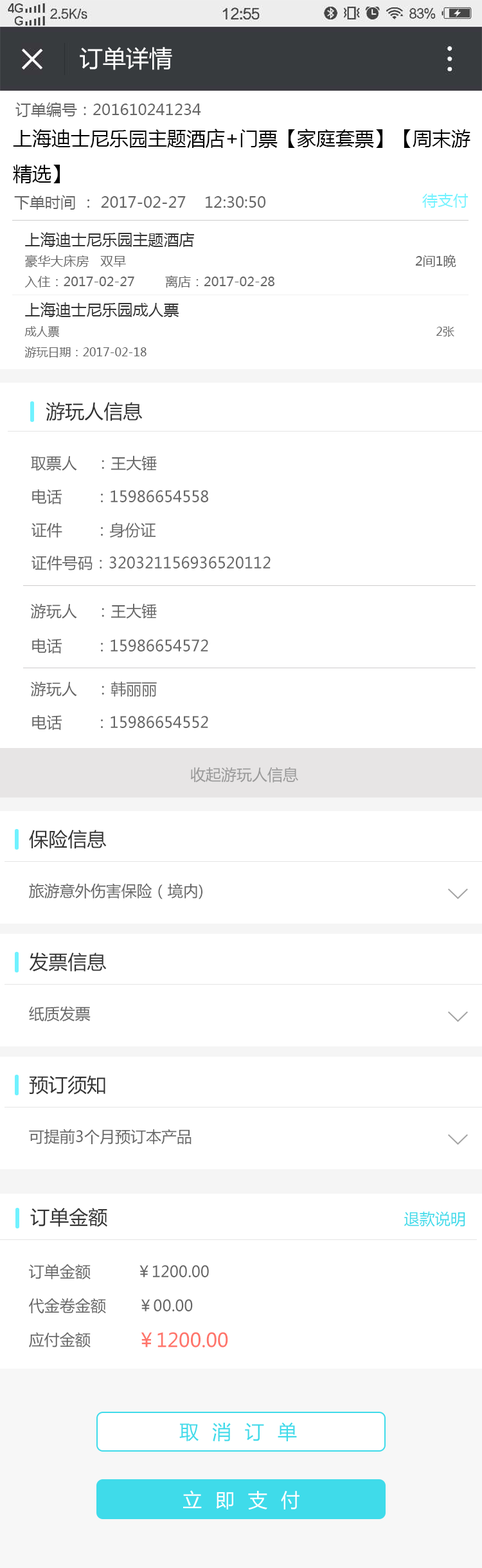
<style>
.page{position:relative;width:482px;height:1568px;background:#ffffff}
.page>*{position:absolute;margin:0}
.t1{font:23.2px "MicrosoftYaHei";color:#ffffff}
.t2{font:15.4px "MicrosoftYaHei";color:#666666}
.t3{font:19.3px/37.9px "MicrosoftYaHei";color:#000000}
.t4{font:15.4px "MicrosoftYaHei";color:#70f2ff}
.t5{font:12.9px/23.2px "MicrosoftYaHei";color:#666666}
.t6{font:15.4px/23.2px "MicrosoftYaHei";color:#333333}
.t7{font:11.6px/23.2px "MicrosoftYaHei";color:#666666}
.t8{font:19.3px "MicrosoftYaHei";color:#333333}
.t9{font:15.4px "MicrosoftYaHei";color:#999999}
.t10{font:15.4px "MicrosoftYaHei";color:#3fdbea}
.t11{font:19.3px "MicrosoftYaHei";color:#ff756b}
.t12{font:19.3px "MicrosoftYaHei";letter-spacing:0.2em;color:#3fdbea}
.t13{font:19.3px "MicrosoftYaHei";letter-spacing:0.2em;color:#ffffff}
</style>
<div class="page">
<p class="t1" style="left:80px;top:47px;width:92px;height:23px">订单详情</p>
<p class="t2" style="left:15px;top:102px;width:186px;height:15px">订单编号：201610241234</p>
<p class="t3" style="left:13px;top:129px;width:458px;height:54px">上海迪士尼乐园主题酒店+门票【家庭套票】【周末游<br>精选】</p>
<p class="t2" style="left:14px;top:195px;width:252px;height:15px">下单时间 ： 2017-02-27    12:30:50</p>
<p class="t4" style="left:423px;top:193px;width:46px;height:15px">待支付</p>
<p class="t5" style="left:24px;top:232px;width:433px;height:56px"><span class="t6">上海迪士尼乐园主题酒店<br></span>豪华大床房   双早                                                                            2间1晚<br>入住：2017-02-27        离店：2017-02-28</p>
<p class="t7" style="left:24px;top:302px;width:431px;height:56px"><span class="t6">上海迪士尼乐园成人票<br></span>成人票                                                                                                              2张<br>游玩日期：2017-02-18</p>
<p class="t8" style="left:46px;top:402px;width:97px;height:19px">游玩人信息</p>
<p class="t2" style="left:31px;top:455px;width:126px;height:16px">取票人    ：王大锤</p>
<p class="t2" style="left:32px;top:489px;width:176px;height:15px">电话       ：15986654558</p>
<p class="t2" style="left:32px;top:522px;width:124px;height:16px">证件       ：身份证</p>
<p class="t2" style="left:32px;top:556px;width:239px;height:14px">证件号码：320321156936520112</p>
<p class="t2" style="left:30px;top:603px;width:127px;height:16px">游玩人    ：王大锤</p>
<p class="t2" style="left:32px;top:639px;width:176px;height:14px">电话       ：15986654572</p>
<p class="t2" style="left:30px;top:681px;width:127px;height:16px">游玩人    ：韩丽丽</p>
<p class="t2" style="left:32px;top:715px;width:176px;height:15px">电话       ：15986654552</p>
<p class="t9" style="left:190px;top:767px;width:108px;height:16px">收起游玩人信息</p>
<p class="t8" style="left:29px;top:830px;width:78px;height:19px">保险信息</p>
<p class="t2" style="left:29px;top:883px;width:174px;height:16px">旅游意外伤害保险（境内)</p>
<p class="t8" style="left:29px;top:953px;width:78px;height:19px">发票信息</p>
<p class="t2" style="left:29px;top:1006px;width:62px;height:15px">纸质发票</p>
<p class="t8" style="left:29px;top:1075px;width:76px;height:20px">预订须知</p>
<p class="t2" style="left:29px;top:1129px;width:163px;height:16px">可提前3个月预订本产品</p>
<p class="t8" style="left:30px;top:1208px;width:77px;height:19px">订单金额</p>
<p class="t10" style="left:405px;top:1211px;width:61px;height:16px">退款说明</p>
<p class="t2" style="left:29px;top:1264px;width:180px;height:16px">订单金额          ￥1200.00</p>
<p class="t2" style="left:29px;top:1298px;width:164px;height:16px">代金卷金额       ￥00.00</p>
<p class="t2" style="left:29px;top:1332px;width:62px;height:16px">应付金额</p>
<p class="t11" style="left:141px;top:1332px;width:87px;height:15px">￥1200.00</p>
<p class="t12" style="left:179px;top:1422px;width:118px;height:19px">取 消 订 单</p>
<p class="t13" style="left:183px;top:1490px;width:117px;height:20px">立 即 支 付</p>
</div>
